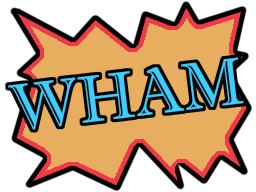
<style>
.page{position:relative;width:256px;height:192px;background:#e8ae60}
.page>*{position:absolute;margin:0}
.t1{font:66.1px "ImprintMT-Shadow";color:#3bcfff}
</style>
<div class="page">
<p class="t1" style="left:8px;top:57px;width:236px;height:73px;rotate:-7deg">WHAM</p>
</div>
